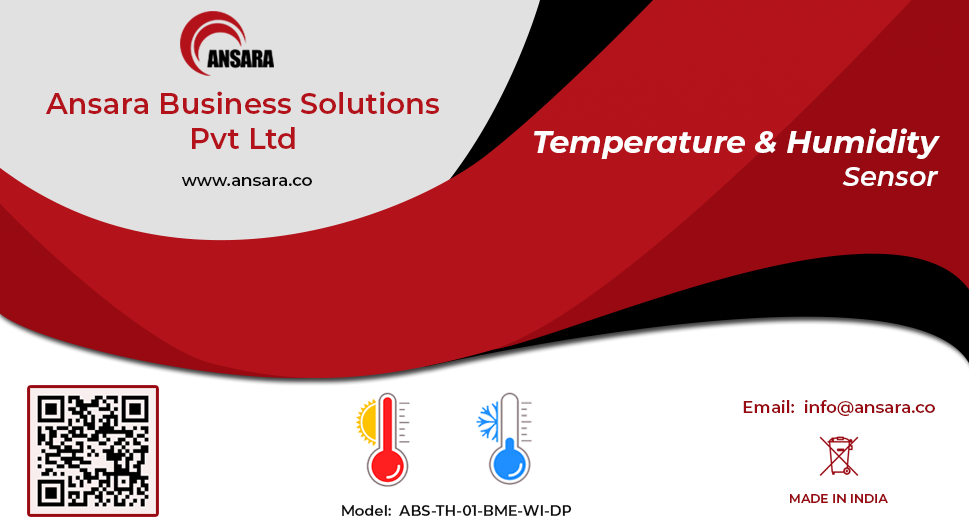
<style>
.page{position:relative;width:969px;height:531px;background:#ffffff}
.page>*{position:absolute;margin:0}
.t1{font:29.2px "Montserrat-SemiBold";color:#b3121a}
.t2{font:31.2px "Montserrat-BoldItalic";color:#ffffff}
.t3{font:27.1px "Montserrat-SemiBoldItalic";color:#ffffff}
.t4{font:16.7px "Montserrat-SemiBold";color:#080808}
.t5{font:16.7px "Montserrat-SemiBold";color:#980911}
.t6{font:12.5px "Montserrat-SemiBold";color:#980911}
.t7{font:14.6px "Montserrat-SemiBold";color:#111111}
</style>
<div class="page">
<p class="t1" style="left:45px;top:91px;width:394px;height:58px;text-align:center">Ansara Business Solutions<br>Pvt Ltd</p>
<p class="t2" style="left:534px;top:128px;width:406px;height:58px;text-align:right">Temperature &amp; Humidity<br><span class="t3">Sensor</span></p>
<p class="t4" style="left:181px;top:177px;width:131px;height:9px">www.ansara.co</p>
<p class="t5" style="left:743px;top:400px;width:192px;height:16px">Email:  info@ansara.co</p>
<p class="t6" style="left:790px;top:494px;width:98px;height:9px">MADE IN INDIA</p>
<p class="t7" style="left:342px;top:505px;width:230px;height:11px">Model:  ABS-TH-01-BME-WI-DP</p>
</div>
